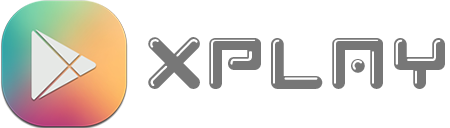
<style>
.page{position:relative;width:450px;height:128px;background:#ffffff}
.page>*{position:absolute;margin:0}
.t1{font:72px "BalloonLetters";color:#777777}
</style>
<div class="page">
<p class="t1" style="left:148px;top:37px;width:297px;height:52px">XPLAY</p>
</div>
